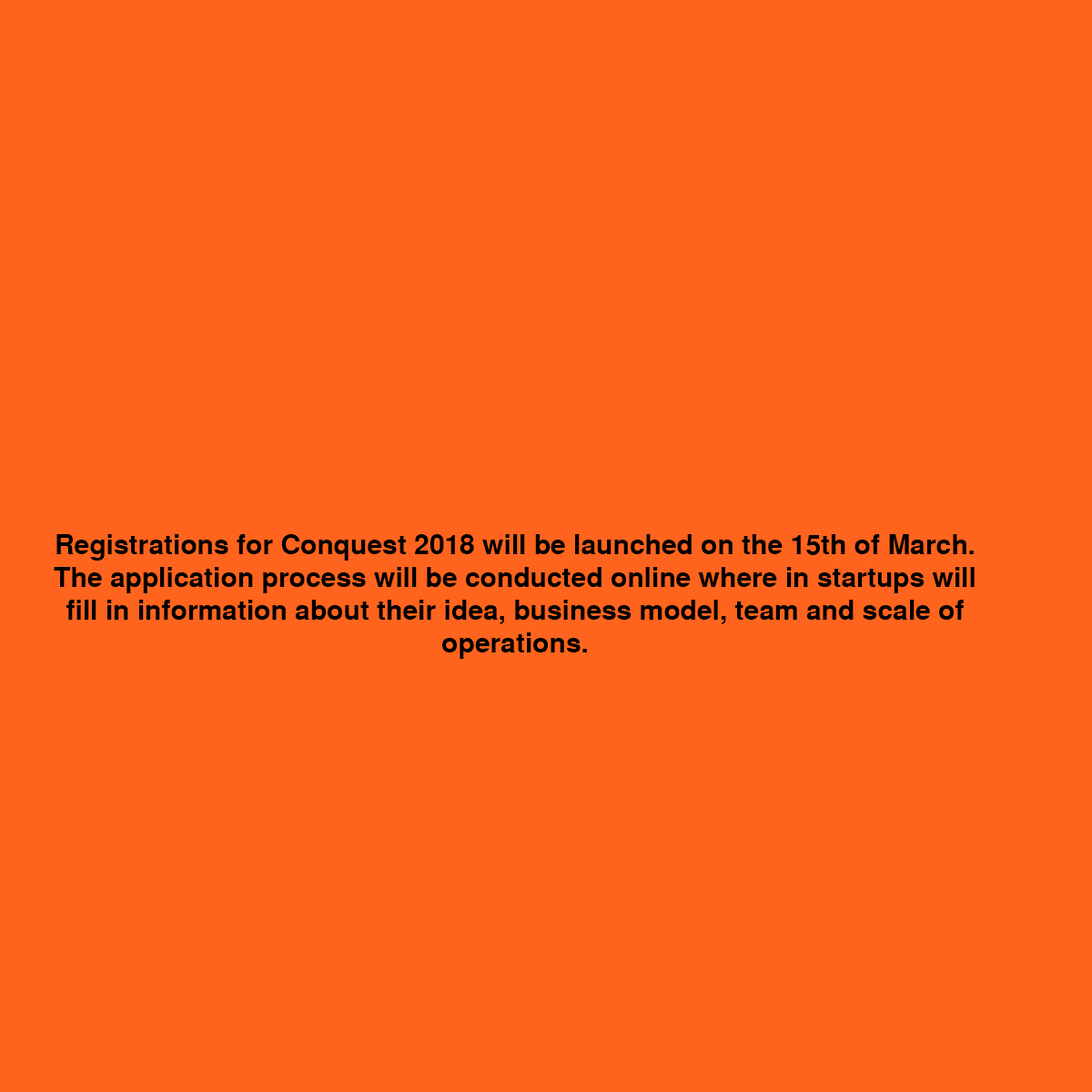
<style>
.page{position:relative;width:1092px;height:1092px;background:#fe641e}
.page>*{position:absolute;margin:0}
.t1{font:27.3px "SansSerifBold";color:#000000}
</style>
<div class="page">
<p class="t1" style="left:54px;top:534px;width:921px;height:125px;text-align:center">Registrations for Conquest 2018 will be launched on the 15th of March. The application process will be conducted online where in startups will fill in information about their idea, business model, team and scale of operations.</p>
</div>
